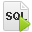
<style>
.page{position:relative;width:32px;height:32px;background:#ffffff}
.page>*{position:absolute;margin:0}
.t1{font:11px "Arial-BoldMT";color:#313131}
</style>
<div class="page">
<p class="t1" style="left:6px;top:12px;width:21px;height:9px">SQL</p>
</div>
